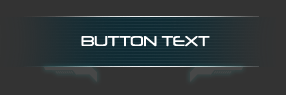
<style>
.page{position:relative;width:286px;height:95px;background:#333333}
.page>*{position:absolute;margin:0}
.t1{font:13.6px "Neuropol-Regular";color:#ffffff}
</style>
<div class="page">
<p class="t1" style="left:81px;top:36px;width:129px;height:11px">BUTTON TEXT</p>
</div>
